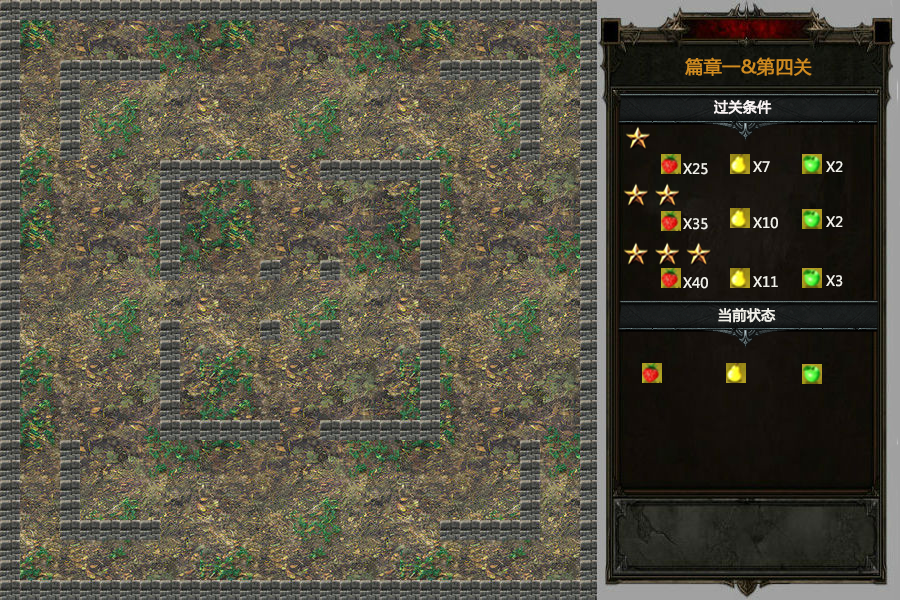
<style>
.page{position:relative;width:900px;height:600px}
.page>*{position:absolute;margin:0}
.t1{font:18px "MicrosoftYaHei";color:#cf8b20;font-weight:bold}
.t2{font:14px "MicrosoftYaHei";color:#f9f3f3;font-weight:bold}
.t3{font:14px "MicrosoftYaHei";color:#f1f0e9}
.t4{font:14px "MicrosoftYaHei";color:#f1f0e9;font-weight:bold}
</style>
<div class="page">
<p class="t1" style="left:685px;top:57px;width:127px;height:19px">篇章一&amp;第四关</p>
<p class="t2" style="left:714px;top:100px;width:58px;height:15px">过关条件</p>
<p class="t3" style="left:753px;top:161px;width:17px;height:11px">X7</p>
<p class="t3" style="left:826px;top:161px;width:17px;height:11px">X2</p>
<p class="t3" style="left:683px;top:163px;width:25px;height:12px">X25</p>
<p class="t3" style="left:683px;top:218px;width:25px;height:12px">X35</p>
<p class="t3" style="left:753px;top:217px;width:25px;height:12px">X10</p>
<p class="t3" style="left:826px;top:216px;width:17px;height:11px">X2</p>
<p class="t3" style="left:683px;top:277px;width:25px;height:12px">X40</p>
<p class="t3" style="left:753px;top:276px;width:25px;height:11px">X11</p>
<p class="t3" style="left:826px;top:275px;width:17px;height:12px">X3</p>
<p class="t4" style="left:718px;top:308px;width:58px;height:15px">当前状态</p>
</div>
